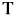
<style>
.page{position:relative;width:16px;height:16px;background:#ffffff}
.page>*{position:absolute;margin:0}
.t1{font:18px "Times-Roman";letter-spacing:-0.02em;color:#000000;font-weight:bold}
</style>
<div class="page">
<p class="t1" style="left:2px;top:2px;width:12px;height:13px">T</p>
</div>
